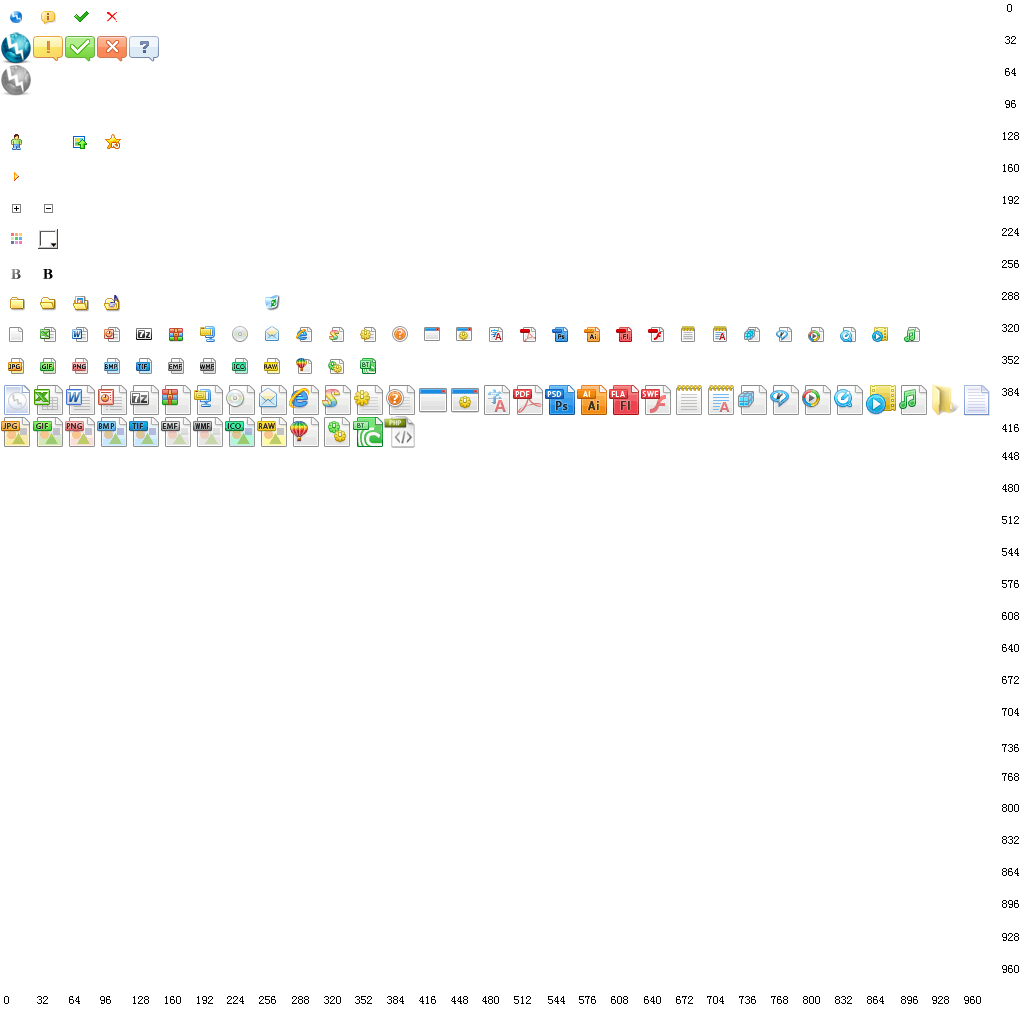
<style>
.page{position:relative;width:1024px;height:1024px;background:#ffffff}
.page>*{position:absolute;margin:0}
.t1{font:12px "SimSun";color:#000000}
</style>
<div class="page">
<p class="t1" style="left:1007px;top:4px;width:5px;height:8px">0</p>
<p class="t1" style="left:1005px;top:36px;width:11px;height:8px">32</p>
<p class="t1" style="left:1005px;top:68px;width:11px;height:8px">64</p>
<p class="t1" style="left:1005px;top:100px;width:11px;height:8px">96</p>
<p class="t1" style="left:1003px;top:132px;width:16px;height:8px">128</p>
<p class="t1" style="left:1003px;top:164px;width:16px;height:8px">160</p>
<p class="t1" style="left:1003px;top:196px;width:16px;height:8px">192</p>
<p class="t1" style="left:1002px;top:228px;width:17px;height:8px">224</p>
<p class="t1" style="left:1002px;top:260px;width:17px;height:8px">256</p>
<p class="t1" style="left:1002px;top:292px;width:17px;height:8px">288</p>
<p class="t1" style="left:1002px;top:324px;width:17px;height:8px">320</p>
<p class="t1" style="left:1002px;top:356px;width:17px;height:8px">352</p>
<p class="t1" style="left:1002px;top:388px;width:17px;height:8px">384</p>
<p class="t1" style="left:1002px;top:424px;width:17px;height:8px">416</p>
<p class="t1" style="left:1002px;top:452px;width:17px;height:8px">448</p>
<p class="t1" style="left:1002px;top:484px;width:17px;height:8px">480</p>
<p class="t1" style="left:1002px;top:516px;width:17px;height:8px">512</p>
<p class="t1" style="left:1002px;top:548px;width:17px;height:8px">544</p>
<p class="t1" style="left:1002px;top:580px;width:17px;height:8px">576</p>
<p class="t1" style="left:1002px;top:612px;width:17px;height:8px">608</p>
<p class="t1" style="left:1002px;top:644px;width:17px;height:8px">640</p>
<p class="t1" style="left:1002px;top:676px;width:17px;height:8px">672</p>
<p class="t1" style="left:1002px;top:708px;width:17px;height:8px">704</p>
<p class="t1" style="left:1002px;top:744px;width:17px;height:8px">736</p>
<p class="t1" style="left:1002px;top:773px;width:17px;height:8px">768</p>
<p class="t1" style="left:1002px;top:804px;width:17px;height:8px">800</p>
<p class="t1" style="left:1002px;top:836px;width:17px;height:8px">832</p>
<p class="t1" style="left:1002px;top:868px;width:17px;height:8px">864</p>
<p class="t1" style="left:1002px;top:900px;width:17px;height:8px">896</p>
<p class="t1" style="left:1002px;top:933px;width:17px;height:8px">928</p>
<p class="t1" style="left:1002px;top:965px;width:17px;height:8px">960</p>
<p class="t1" style="left:4px;top:996px;width:5px;height:8px">0</p>
<p class="t1" style="left:37px;top:996px;width:11px;height:8px">32</p>
<p class="t1" style="left:69px;top:996px;width:11px;height:8px">64</p>
<p class="t1" style="left:100px;top:996px;width:11px;height:8px">96</p>
<p class="t1" style="left:133px;top:996px;width:16px;height:8px">128</p>
<p class="t1" style="left:165px;top:996px;width:16px;height:8px">160</p>
<p class="t1" style="left:197px;top:996px;width:16px;height:8px">192</p>
<p class="t1" style="left:227px;top:996px;width:17px;height:8px">224</p>
<p class="t1" style="left:259px;top:996px;width:17px;height:8px">256</p>
<p class="t1" style="left:292px;top:996px;width:17px;height:8px">288</p>
<p class="t1" style="left:324px;top:996px;width:17px;height:8px">320</p>
<p class="t1" style="left:355px;top:996px;width:17px;height:8px">352</p>
<p class="t1" style="left:387px;top:996px;width:17px;height:8px">384</p>
<p class="t1" style="left:419px;top:996px;width:17px;height:8px">416</p>
<p class="t1" style="left:451px;top:996px;width:17px;height:8px">448</p>
<p class="t1" style="left:482px;top:996px;width:17px;height:8px">480</p>
<p class="t1" style="left:514px;top:996px;width:17px;height:8px">512</p>
<p class="t1" style="left:548px;top:996px;width:17px;height:8px">544</p>
<p class="t1" style="left:579px;top:996px;width:17px;height:8px">576</p>
<p class="t1" style="left:611px;top:996px;width:17px;height:8px">608</p>
<p class="t1" style="left:644px;top:996px;width:17px;height:8px">640</p>
<p class="t1" style="left:676px;top:996px;width:17px;height:8px">672</p>
<p class="t1" style="left:707px;top:996px;width:17px;height:8px">704</p>
<p class="t1" style="left:739px;top:996px;width:17px;height:8px">736</p>
<p class="t1" style="left:771px;top:996px;width:17px;height:8px">768</p>
<p class="t1" style="left:803px;top:996px;width:17px;height:8px">800</p>
<p class="t1" style="left:835px;top:996px;width:17px;height:8px">832</p>
<p class="t1" style="left:867px;top:996px;width:17px;height:8px">864</p>
<p class="t1" style="left:901px;top:996px;width:17px;height:8px">896</p>
<p class="t1" style="left:932px;top:996px;width:17px;height:8px">928</p>
<p class="t1" style="left:964px;top:996px;width:17px;height:8px">960</p>
</div>
